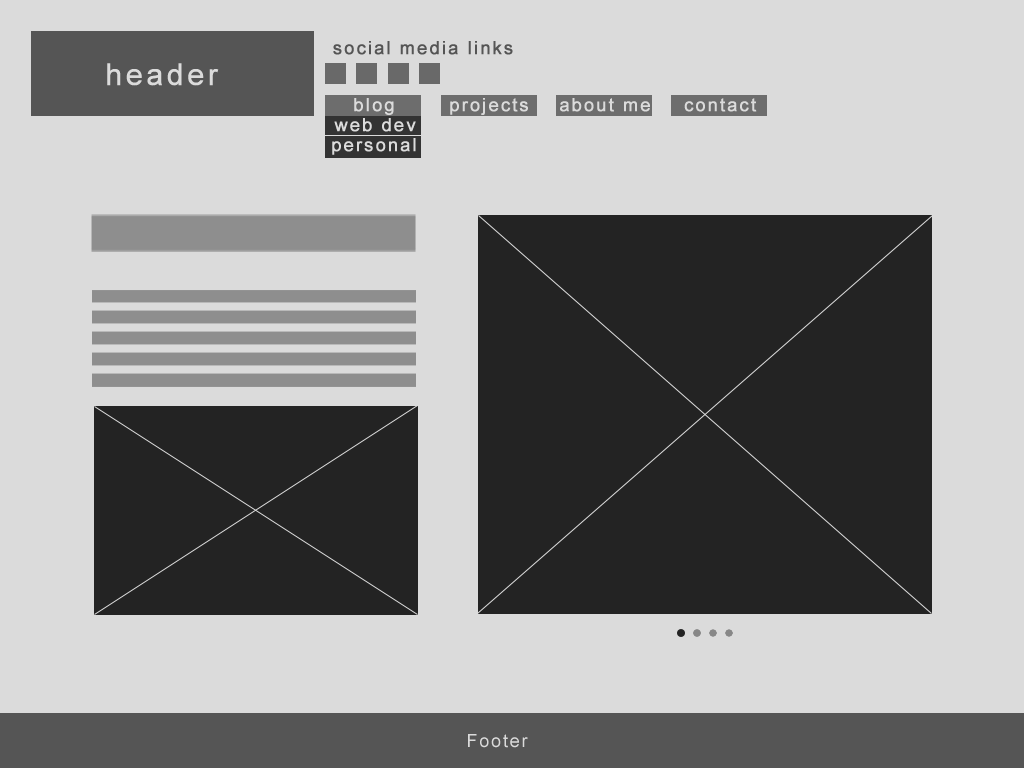
<style>
.page{position:relative;width:1024px;height:768px;background:#dbdbdb}
.page>*{position:absolute;margin:0}
.t1{font:18px "ArialMT";letter-spacing:0.1em;color:#555555;font-weight:bold}
.t2{font:30px "ArialMT";letter-spacing:0.1em;color:#dbdbdb;font-weight:bold}
.t3{font:18px "ArialMT";letter-spacing:0.1em;color:#dbdbdb;font-weight:bold}
.t4{font:18px "ArialMT";letter-spacing:0.1em;color:#dbdbdb}
</style>
<div class="page">
<p class="t1" style="left:333px;top:41px;width:180px;height:14px">social media links</p>
<p class="t2" style="left:107px;top:63px;width:112px;height:23px">header</p>
<p class="t3" style="left:354px;top:98px;width:40px;height:17px">blog</p>
<p class="t3" style="left:450px;top:98px;width:78px;height:17px">projects</p>
<p class="t3" style="left:560px;top:98px;width:90px;height:14px">about me</p>
<p class="t3" style="left:684px;top:98px;width:73px;height:14px">contact</p>
<p class="t3" style="left:334px;top:118px;width:82px;height:14px">web dev</p>
<p class="t3" style="left:332px;top:138px;width:84px;height:17px">personal</p>
<p class="t4" style="left:468px;top:734px;width:60px;height:14px">Footer</p>
</div>
